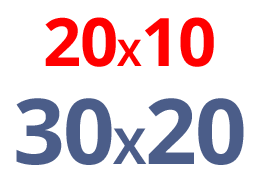
<style>
.page{position:relative;width:253px;height:181px;background:#ffffff}
.page>*{position:absolute;margin:0}
.t1{font:66.8px "OpenSans-Bold";letter-spacing:-0.02em;color:#ff0000;text-transform:uppercase}
.t2{font:36.6px "OpenSans-Bold";letter-spacing:-0.02em;color:#ff0000;text-transform:uppercase}
.t3{font:90.7px "OpenSans-Bold";letter-spacing:-0.02em;color:#4b5d89;text-transform:uppercase}
.t4{font:49.7px "OpenSans-Bold";letter-spacing:-0.02em;color:#4b5d89;text-transform:uppercase}
</style>
<div class="page">
<p class="t1" style="left:45px;top:17px;width:169px;height:50px">20<span class="t2">X</span>10</p>
<p class="t3" style="left:16px;top:98px;width:228px;height:67px">30<span class="t4">X</span>20</p>
</div>
